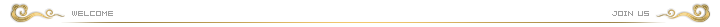
<style>
.page{position:relative;width:720px;height:27px;background:#ffffff}
.page>*{position:absolute;margin:0}
.t1{font:8px "04b08";color:#9e9e9e}
</style>
<div class="page">
<p class="t1" style="left:72px;top:11px;width:577px;height:5px">WELCOME               JOIN US</p>
</div>
